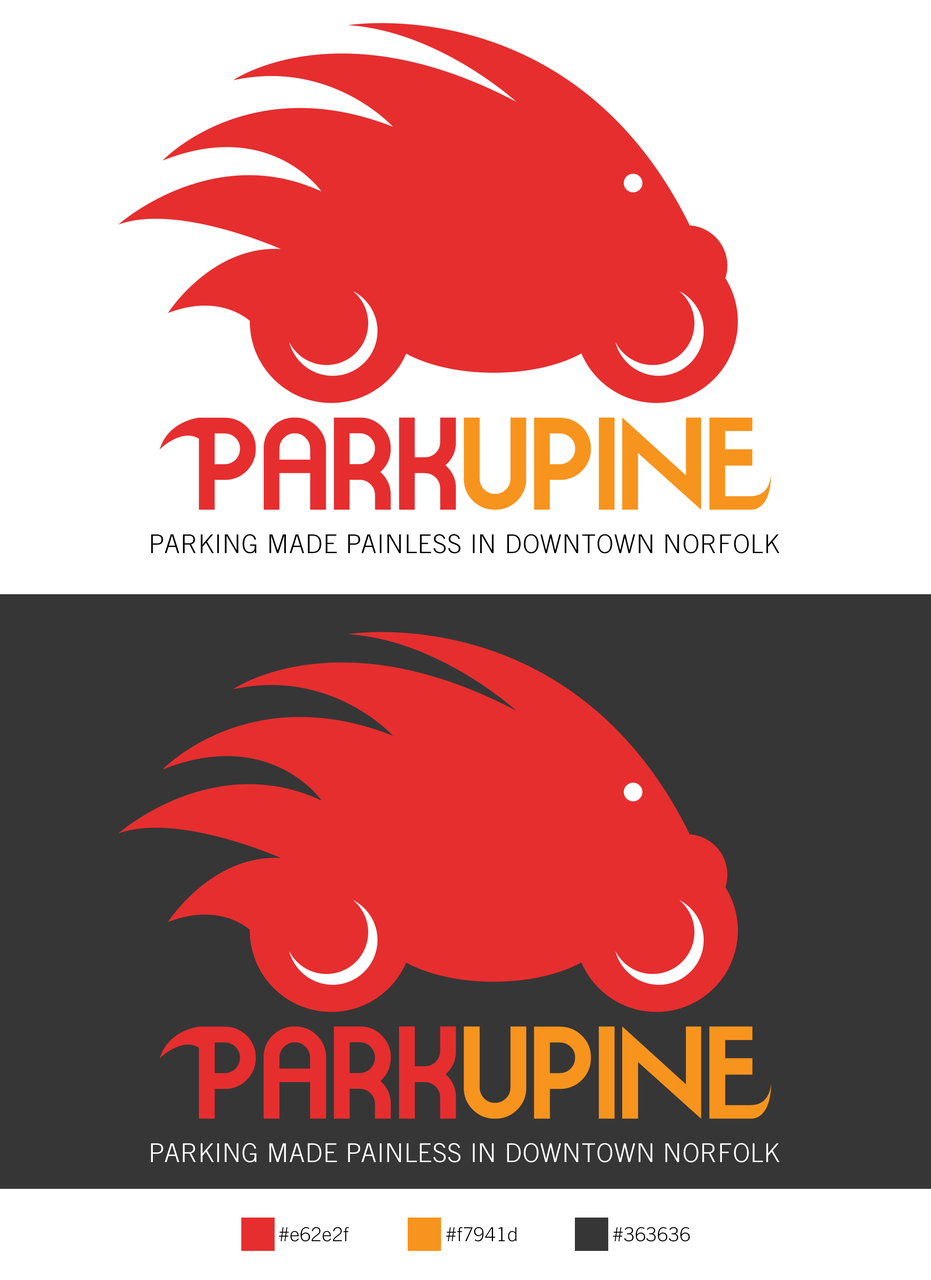
<style>
.page{position:relative;width:931px;height:1280px;background:#ffffff}
.page>*{position:absolute;margin:0}
.t1{font:116.4px "Moderna";color:#f7941d}
.t2{font:116.4px "Moderna";color:#e62e2f}
.t3{font:25.9px "TradeGothicLTStd-Light";letter-spacing:0.02em;color:#000000}
.t4{font:25.9px "TradeGothicLTStd-Light";letter-spacing:0.02em;color:#ffffff}
.t5{font:19.4px "TradeGothicLTStd-Light";letter-spacing:0.02em;color:#000000}
</style>
<div class="page">
<p class="t1" style="left:199px;top:418px;width:554px;height:92px"><span class="t2">PARK</span>UPINE</p>
<p class="t3" style="left:151px;top:534px;width:629px;height:20px">PARKING MADE PAINLESS IN DOWNTOWN NORFOLK</p>
<p class="t1" style="left:199px;top:1027px;width:554px;height:92px"><span class="t2">PARK</span>UPINE</p>
<p class="t4" style="left:151px;top:1143px;width:629px;height:20px">PARKING MADE PAINLESS IN DOWNTOWN NORFOLK</p>
<p class="t5" style="left:279px;top:1227px;width:70px;height:15px">#e62e2f</p>
<p class="t5" style="left:446px;top:1227px;width:71px;height:15px">#f7941d</p>
<p class="t5" style="left:613px;top:1227px;width:77px;height:15px">#363636</p>
</div>
